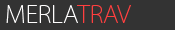
<style>
.page{position:relative;width:175px;height:30px;background:#333333}
.page>*{position:absolute;margin:0}
.t1{font:24px "KozGoPro-ExtraLight";color:#fffefe}
.t2{font:24px "KozGoPro-ExtraLight";color:#ff3f3f}
</style>
<div class="page">
<p class="t1" style="left:6px;top:5px;width:125px;height:18px">MERLA<span class="t2">TRAV</span></p>
</div>
